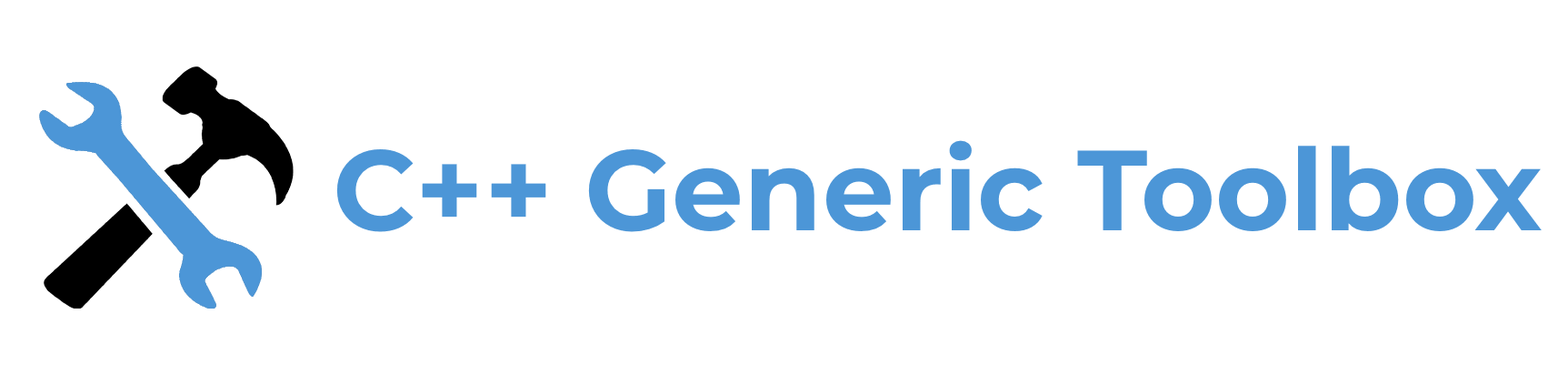
<style>
.page{position:relative;width:1568px;height:375px;background:#ffffff}
.page>*{position:absolute;margin:0}
.t1{font:113.6px "Montserrat-Bold";color:#4c96d7}
</style>
<div class="page">
<p class="t1" style="left:336px;top:140px;width:1206px;height:92px">C++ Generic Toolbox</p>
</div>
